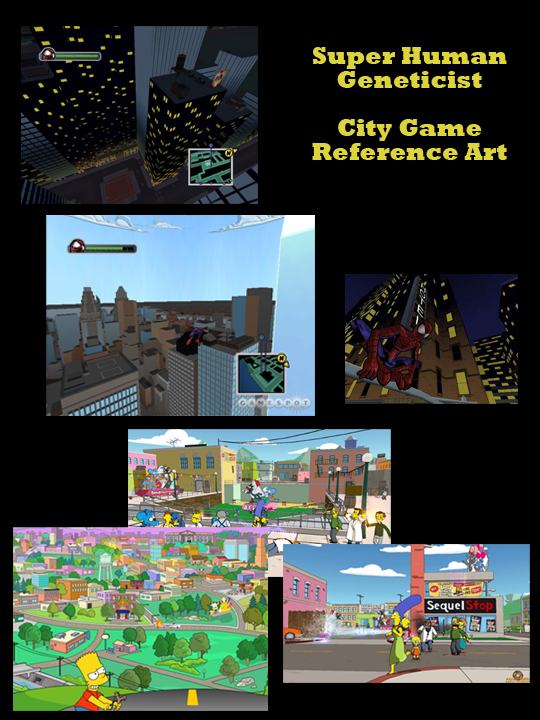
<style>
.page{position:relative;width:540px;height:720px;background:#000000}
.page>*{position:absolute;margin:0}
.t1{font:24px/24px "Rockwell-ExtraBold";color:#ddd43c}
</style>
<div class="page">
<p class="t1" style="left:312px;top:47px;width:195px;height:113px;text-align:center">Super Human Geneticist<br><br>City Game <br>Reference Art</p>
</div>
